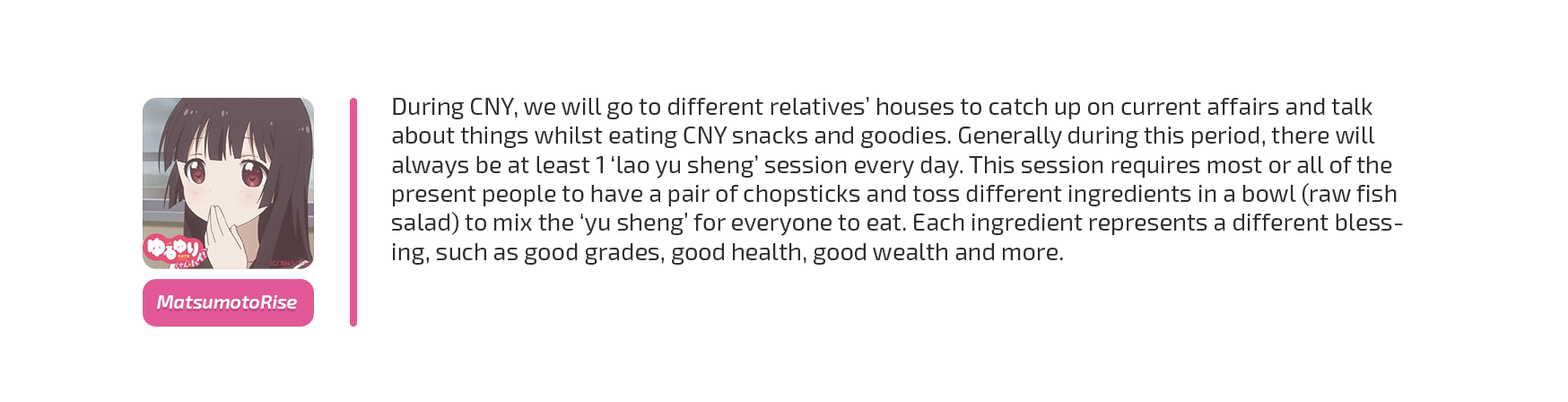
<style>
.page{position:relative;width:1568px;height:402px;background:#ffffff}
.page>*{position:absolute;margin:0}
.t1{font:24.2px "Exo2-Regular";color:#2e2e2e}
.t2{font:19.2px "Exo2-SemiBoldItalic";color:#ffffff}
</style>
<div class="page">
<p class="t1" style="left:392px;top:97px;width:1011px;height:168px">During CNY, we will go to different relatives’ houses to catch up on current affairs and talk about things whilst eating CNY snacks and goodies. Generally during this period, there will always be at least 1 ‘lao yu sheng’ session every day. This session requires most or all of the present people to have a pair of chopsticks and toss different ingredients in a bowl (raw fish salad) to mix the ‘yu sheng’ for everyone to eat. Each ingredient represents a different blessing, such as good grades, good health, good wealth and more.</p>
<p class="t2" style="left:157px;top:295px;width:140px;height:14px">MatsumotoRise</p>
</div>
